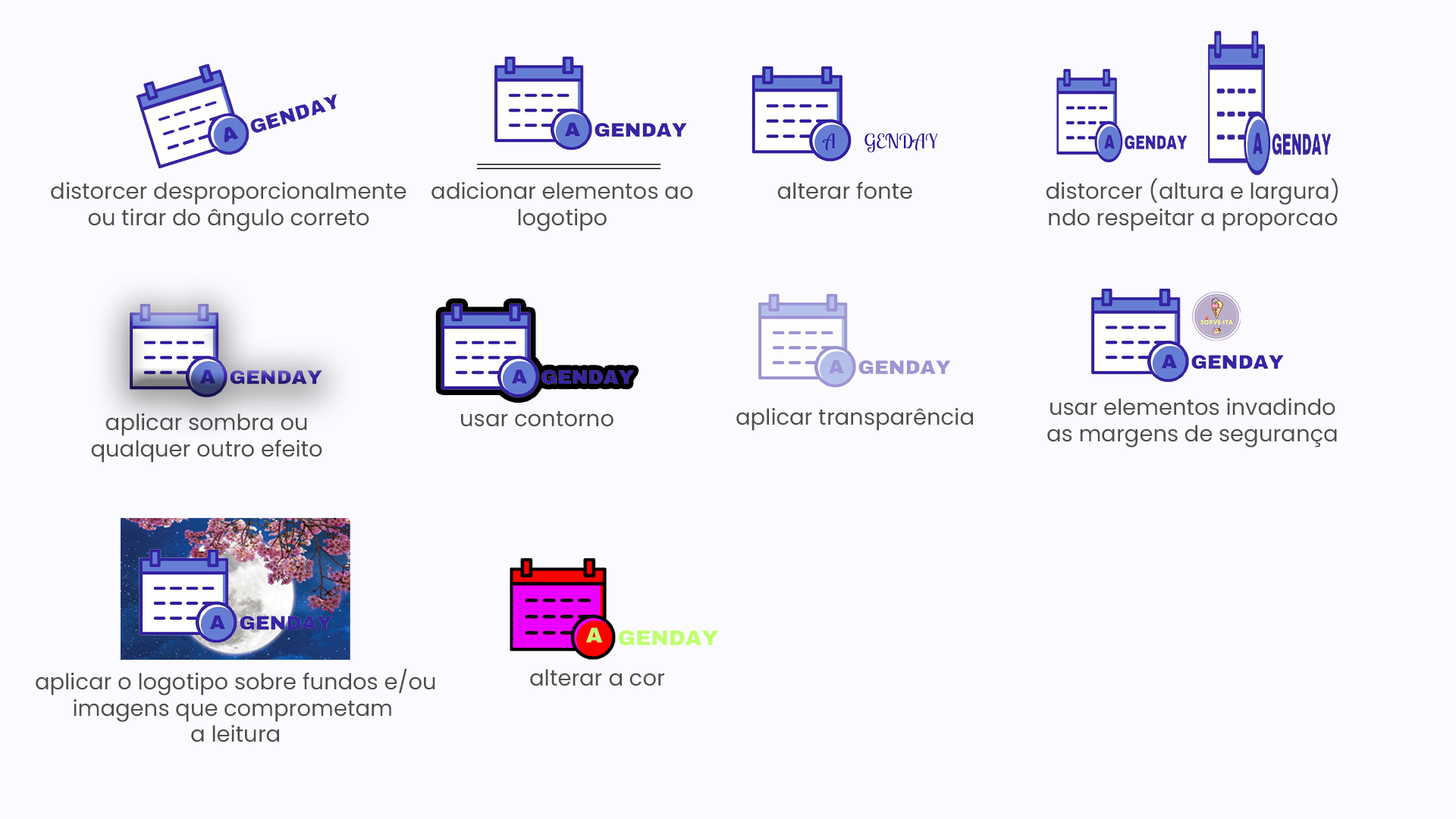
<style>
.page{position:relative;width:1456px;height:819px;background:#fbfbff}
.page>*{position:absolute;margin:0}
.t1{font:22px "Poppins-Regular";color:#514c4c}
</style>
<div class="page">
<p class="t1" style="left:51px;top:182px;width:355px;height:49px;text-align:center">distorcer desproporcionalmente<br>ou tirar do ângulo correto</p>
<p class="t1" style="left:431px;top:182px;width:262px;height:49px;text-align:center">adicionar elementos ao<br>logotipo</p>
<p class="t1" style="left:777px;top:181px;width:135px;height:18px">alterar fonte</p>
<p class="t1" style="left:1046px;top:178px;width:292px;height:53px;text-align:center">distorcer (altura e largura)<br>ndo respeitar a proporcao</p>
<p class="t1" style="left:1047px;top:398px;width:290px;height:49px;text-align:center">usar elementos invadindo<br>as margens de segurança</p>
<p class="t1" style="left:91px;top:413px;width:231px;height:50px;text-align:center">aplicar sombra ou<br>qualquer outro efeito</p>
<p class="t1" style="left:461px;top:411px;width:152px;height:16px">usar contorno</p>
<p class="t1" style="left:736px;top:408px;width:237px;height:23px">aplicar transparência</p>
<p class="t1" style="left:36px;top:668px;width:399px;height:74px;text-align:center">aplicar o logotipo sobre fundos e/ou<br>imagens que comprometam <br>a leitura</p>
<p class="t1" style="left:530px;top:669px;width:134px;height:17px">alterar a cor</p>
</div>
